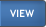
<style>
.page{position:relative;width:46px;height:27px}
.page>*{position:absolute;margin:0}
.t1{font:10px "TrebuchetMS-Bold";letter-spacing:0.01em;color:#ffffff;text-transform:uppercase}
</style>
<div class="page">
<p class="t1" style="left:10px;top:9px;width:24px;height:8px">VIEW</p>
</div>
